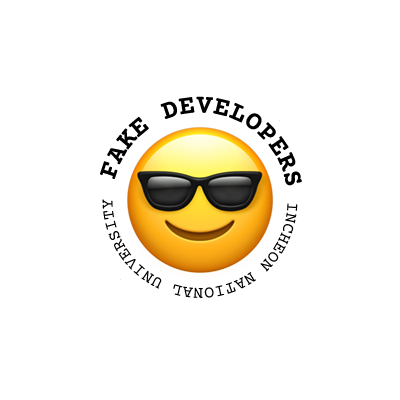
<style>
.page{position:relative;width:400px;height:400px;background:#ffffff}
.page>*{position:absolute;margin:0}
.t1{font:27px "CourierPrime-Bold";color:#000000}
.t2{font:17px "CourierPrime-Regular";color:#000000}
</style>
<div class="page">
<p class="t1" style="left:99px;top:96px;width:203px;height:90px">FAKE DEVELOPERS</p>
<p class="t2" style="left:102px;top:199px;width:196px;height:99px">INCHEON NATIONAL UNIVERSITY</p>
</div>
